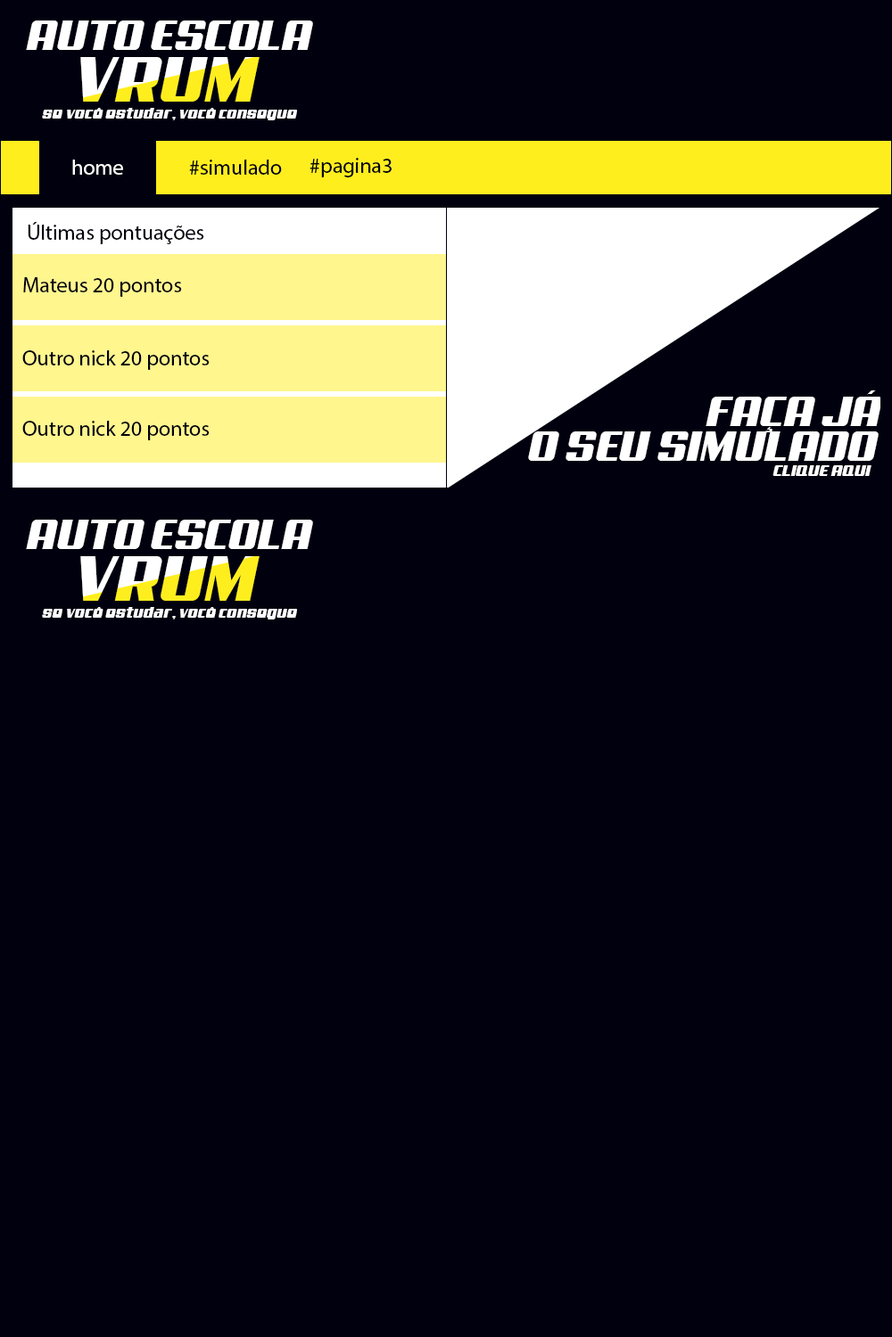
<style>
.page{position:relative;width:892px;height:1337px;background:#00000e}
.page>*{position:absolute;margin:0}
.t1{font:42.8px "Aero";color:#ffffff}
.t2{font:64.5px "Aero"}
.t3{font:16px "Aero";color:#ffffff}
.t4{font:21.4px "MyriadPro-Regular";color:#ffffff}
.t5{font:21.4px "MyriadPro-Regular";color:#00000e}
</style>
<div class="page">
<p class="t1" style="left:26px;top:21px;width:287px;height:29px">AUTO ESCOLA</p>
<p class="t2" style="left:80px;top:57px;width:179px;height:45px">VRUM</p>
<p class="t3" style="left:42px;top:108px;width:255px;height:12px">se você estudar, você consegue</p>
<p class="t4" style="left:72px;top:160px;width:51px;height:15px">home</p>
<p class="t5" style="left:189px;top:160px;width:93px;height:15px">#simulado</p>
<p class="t5" style="left:309px;top:158px;width:82px;height:19px">#pagina3</p>
<p class="t5" style="left:28px;top:222px;width:176px;height:22px">Últimas pontuações</p>
<p class="t5" style="left:23px;top:277px;width:159px;height:20px">Mateus 20 pontos</p>
<p class="t5" style="left:22px;top:350px;width:188px;height:20px">Outro nick 20 pontos</p>
<p class="t1" style="left:705px;top:391px;width:177px;height:41px">FAÇA JÁ</p>
<p class="t5" style="left:22px;top:421px;width:188px;height:19px">Outro nick 20 pontos</p>
<p class="t1" style="left:528px;top:432px;width:350px;height:29px">O SEU SIMULADO</p>
<p class="t3" style="left:772px;top:465px;width:99px;height:11px">CLIQUE AQUI</p>
<p class="t1" style="left:26px;top:520px;width:287px;height:29px">AUTO ESCOLA</p>
<p class="t2" style="left:80px;top:556px;width:179px;height:45px">VRUM</p>
<p class="t3" style="left:42px;top:607px;width:255px;height:13px">se você estudar, você consegue</p>
</div>
